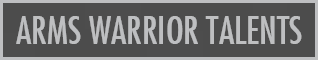
<style>
.page{position:relative;width:318px;height:60px;background:#4c4c4c}
.page>*{position:absolute;margin:0}
.t1{font:37.3px "FuturaCondensed";color:#bebfc1}
</style>
<div class="page">
<p class="t1" style="left:16px;top:16px;width:286px;height:28px">ARMS WARRIOR TALENTS</p>
</div>
